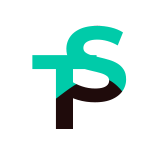
<style>
.page{position:relative;width:150px;height:150px;background:#ffffff}
.page>*{position:absolute;margin:0}
.t1{font:105.5px "Montserrat-Bold";letter-spacing:-0.025em;color:#00cba9}
.t2{font:105.5px "Montserrat-Bold";letter-spacing:-0.025em}
</style>
<div class="page">
<p class="t1" style="left:64px;top:25px;width:63px;height:78px">S</p>
<p class="t2" style="left:32px;top:55px;width:65px;height:74px">T</p>
</div>
